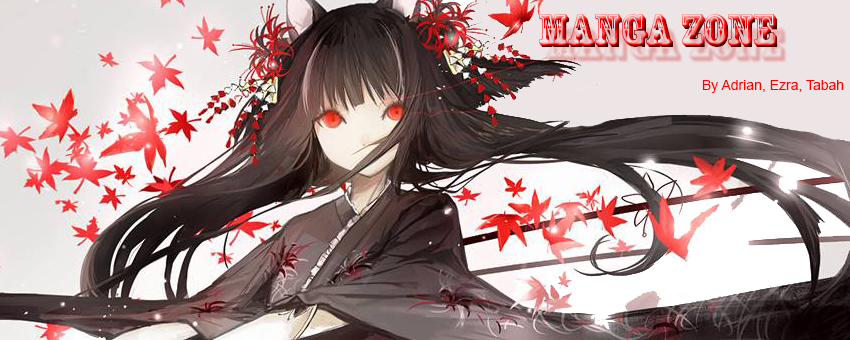
<style>
.page{position:relative;width:850px;height:340px}
.page>*{position:absolute;margin:0}
.t1{font:44px "RosewoodStd-Regular"}
.t2{font:14px "ArialMT";color:#ff0000}
</style>
<div class="page">
<p class="t1" style="left:539px;top:14px;width:238px;height:33px">Manga Zone</p>
<p class="t2" style="left:702px;top:80px;width:142px;height:13px">By Adrian, Ezra, Tabah</p>
</div>
